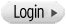
<style>
.page{position:relative;width:66px;height:25px}
.page>*{position:absolute;margin:0}
.t1{font:18.3px "Interstate-LightCondensed";letter-spacing:-0.05em;color:#000000}
</style>
<div class="page">
<p class="t1" style="left:14px;top:4px;width:30px;height:18px">Login</p>
</div>
